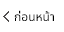
<style>
.page{position:relative;width:64px;height:32px;background:#ffffff}
.page>*{position:absolute;margin:0}
.t1{font:12px "NotoSansThai-Regular";color:#000000}
</style>
<div class="page">
<p class="t1" style="left:14px;top:10px;width:40px;height:11px">ก่อนหน้า</p>
</div>
